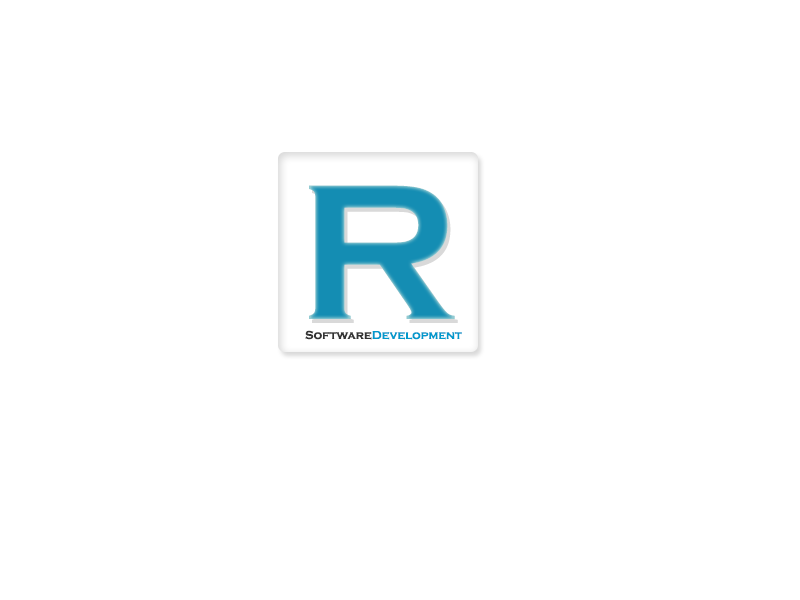
<style>
.page{position:relative;width:800px;height:600px;background:#ffffff}
.page>*{position:absolute;margin:0}
.t1{font:200px "CopperplateGothic-Bold";color:#148db3}
.t2{font:12px "CopperplateGothic-Bold";color:#0099cc}
.t3{font:12px "CopperplateGothic-Bold";color:#333333}
</style>
<div class="page">
<p class="t1" style="left:309px;top:185px;width:146px;height:134px">R</p>
<p class="t2" style="left:305px;top:330px;width:157px;height:10px"><span class="t3">Software</span>Development</p>
</div>
